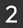
<style>
.page{position:relative;width:23px;height:28px;background:#333333}
.page>*{position:absolute;margin:0}
.t1{font:24px "Outfit-Regular";color:#ffffff;font-weight:bold;font-style:italic}
</style>
<div class="page">
<p class="t1" style="left:5px;top:5px;width:12px;height:18px">2</p>
</div>
